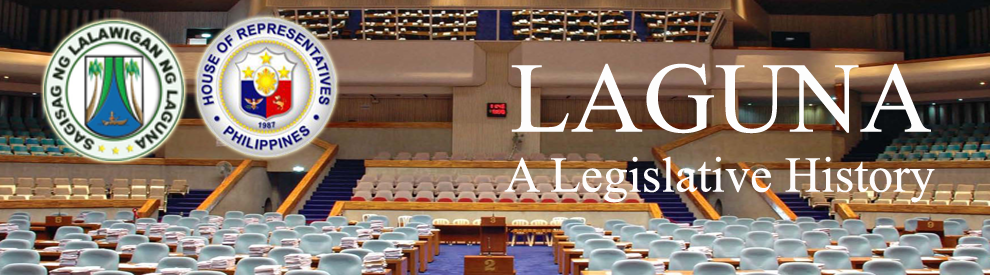
<style>
.page{position:relative;width:990px;height:275px}
.page>*{position:absolute;margin:0}
.t1{font:50px "TimesNewRomanPSMT";color:#fdfcfc}
.t2{font:100px "TimesNewRomanPSMT";color:#fdfdfd}
</style>
<div class="page">
<p class="t1" style="left:504px;top:63px;width:431px;height:140px;text-align:center"><span class="t2">LAGUNA<br></span>A Legislative History</p>
</div>
